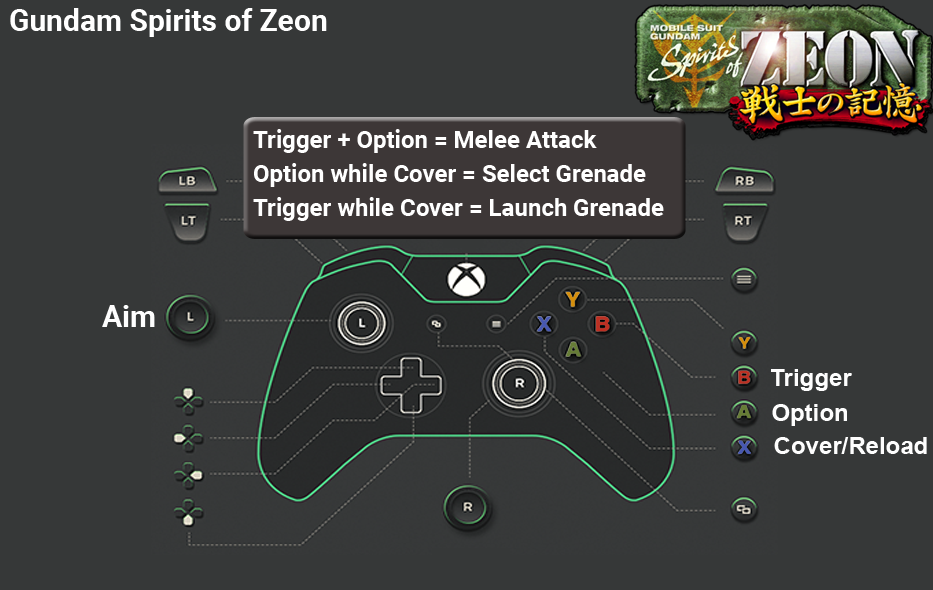
<style>
.page{position:relative;width:933px;height:590px;background:#363838}
.page>*{position:absolute;margin:0}
.t1{font:30px "Roboto-Bold";color:#ffffff}
.t2{font:24px/34px "Roboto-Bold";color:#ffffff}
.t3{font:30px "Roboto-Bold";color:#fefefe}
.t4{font:24px "Arial-BoldMT";color:#fefefe}
</style>
<div class="page">
<p class="t1" style="left:10px;top:8px;width:317px;height:29px">Gundam Spirits of Zeon</p>
<p class="t2" style="left:253px;top:129px;width:411px;height:92px">Trigger + Option = Melee Attack<br>Option while Cover = Select Grenade<br>Trigger while Cover = Launch Grenade</p>
<p class="t3" style="left:102px;top:305px;width:53px;height:22px">Aim</p>
<p class="t4" style="left:771px;top:369px;width:81px;height:22px">Trigger</p>
<p class="t4" style="left:772px;top:404px;width:75px;height:22px">Option</p>
<p class="t4" style="left:774px;top:437px;width:153px;height:17px">Cover/Reload</p>
</div>
